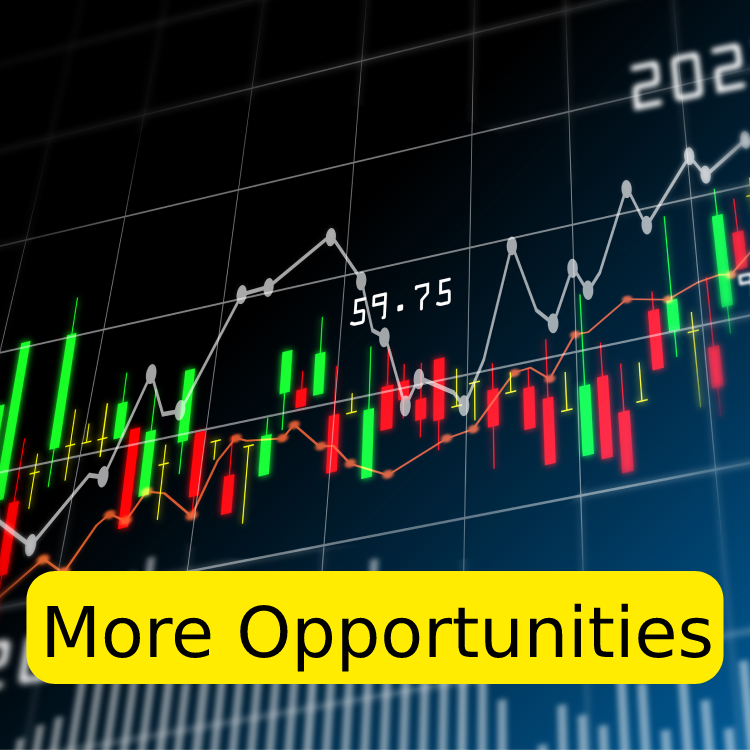
<style>
.page{position:relative;width:750px;height:750px;background:#000000}
.page>*{position:absolute;margin:0}
.t1{font:70px "TTCommonsPro-Rg";color:#000000}
</style>
<div class="page">
<p class="t1" style="left:47px;top:603px;width:664px;height:69px">More Opportunities</p>
</div>
